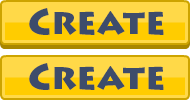
<style>
.page{position:relative;width:190px;height:100px;background:#ffd948}
.page>*{position:absolute;margin:0}
.t1{font:36px "LithosPro-Black";color:#3d4c6b}
</style>
<div class="page">
<p class="t1" style="left:29px;top:8px;width:135px;height:27px">Create</p>
<p class="t1" style="left:29px;top:63px;width:135px;height:27px">Create</p>
</div>
